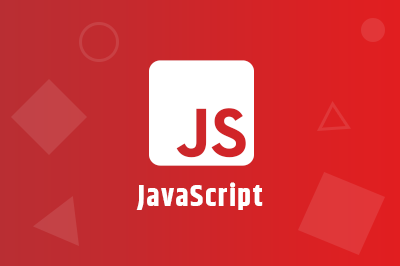
<style>
.page{position:relative;width:400px;height:266px}
.page>*{position:absolute;margin:0}
.t1{font:30px "Khand-Bold";letter-spacing:0.05em;color:#ffffff}
.t2{font:30px "Khand-Bold";letter-spacing:0.05em}
</style>
<div class="page">
<p class="t1" style="left:136px;top:182px;width:127px;height:28px">JavaScript</p>
<p class="t2" style="left:182px;top:182px;width:37px;height:24px">iOS</p>
</div>
